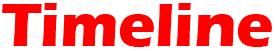
<style>
.page{position:relative;width:275px;height:51px;background:#ffffff}
.page>*{position:absolute;margin:0}
.t1{font:63.1px "ErasITC-Bold";color:#ff0000}
</style>
<div class="page">
<p class="t1" style="left:2px;top:3px;width:270px;height:44px">Timeline</p>
<p class="t1" style="left:3px;top:4px;width:270px;height:44px">Timeline</p>
</div>
